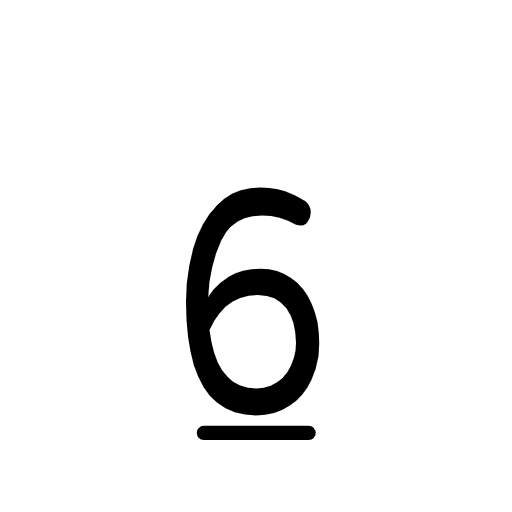
<style>
.page{position:relative;width:512px;height:512px;background:#ffffff}
.page>*{position:absolute;margin:0}
.t1{font:317.3px "VarelaRound-Regular";color:#000000;scale:0.81 1}
.t2{font:213.1px "VarelaRound-Regular";color:#000000}
</style>
<div class="page">
<p class="t1" style="left:186px;top:187px;width:134px;height:229px">6</p>
<p class="t2" style="left:196px;top:425px;width:120px;height:15px">_</p>
</div>
